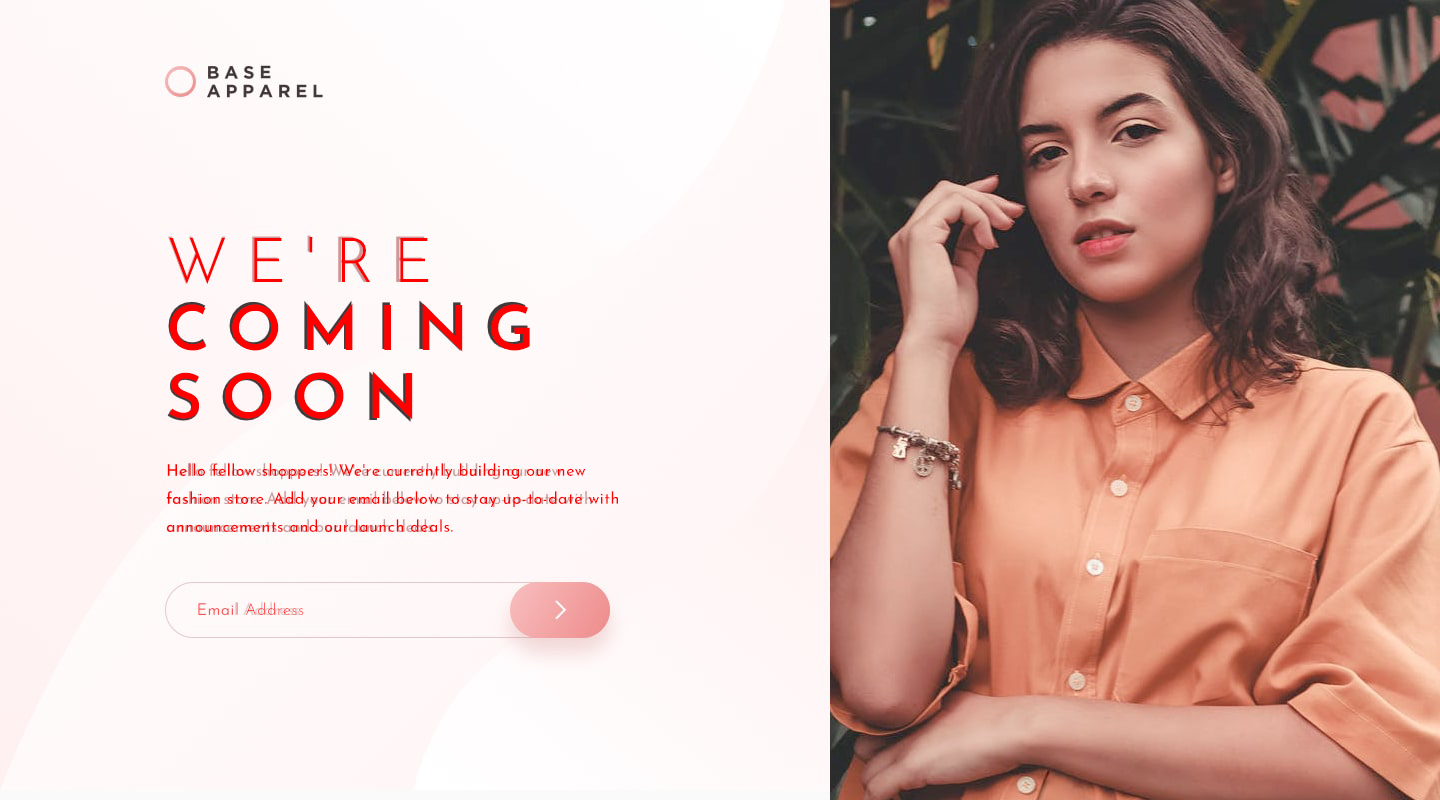
<style>
.page{position:relative;width:1440px;height:800px}
.page>*{position:absolute;margin:0}
.t1{font:62px/68px "JosefinSans-Medium";letter-spacing:0.31em;color:#ff0000;text-transform:uppercase}
.t2{font:62px/68px "JosefinSans-Light";letter-spacing:0.31em;color:#ff0000;text-transform:uppercase}
.t3{font:16px/28px "JosefinSans-Regular";letter-spacing:0.03em;color:#ff0000}
.t4{font:16px "JosefinSans-Light";letter-spacing:0.05em}
</style>
<div class="page">
<p class="t1" style="left:169px;top:237px;width:361px;height:183px"><span class="t2">We're<br></span>coming<br>soon</p>
<p class="t3" style="left:167px;top:463px;width:451px;height:69px">Hello fellow shoppers! We're currently building our new<br>fashion store. Add your email below to stay up-to-date with<br>announcements and our launch deals.</p>
<p class="t4" style="left:198px;top:602px;width:106px;height:13px">Email Address</p>
</div>
